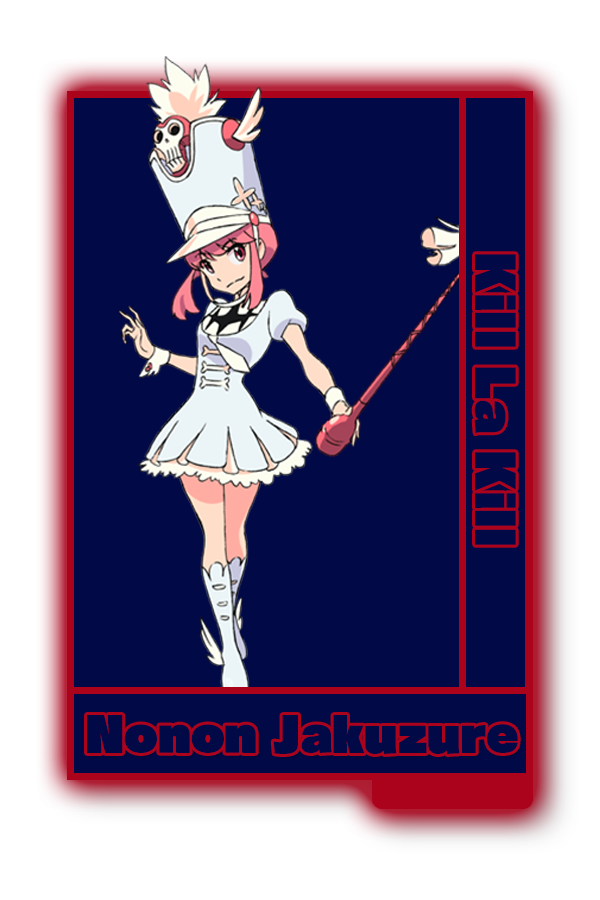
<style>
.page{position:relative;width:600px;height:900px;background:#010947}
.page>*{position:absolute;margin:0}
.t1{font:48.8px "RaglanPunchStd-UB";color:#010947}
.t2{font:45.6px "RaglanPunchStd-UB";color:#010947}
</style>
<div class="page">
<p class="t1" style="left:474px;top:254px;width:42px;height:291px;rotate:90deg">Kill La Kill</p>
<p class="t2" style="left:87px;top:715px;width:431px;height:39px">Nonon Jakuzure</p>
</div>
